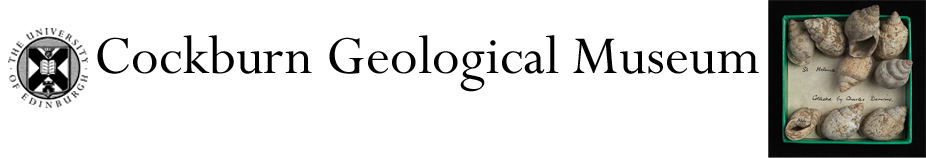
<style>
.page{position:relative;width:926px;height:158px;background:#ffffff}
.page>*{position:absolute;margin:0}
.t1{font:60px "Perpetua";color:#000000}
</style>
<div class="page">
<p class="t1" style="left:97px;top:35px;width:662px;height:57px">Cockburn Geological Museum</p>
</div>
